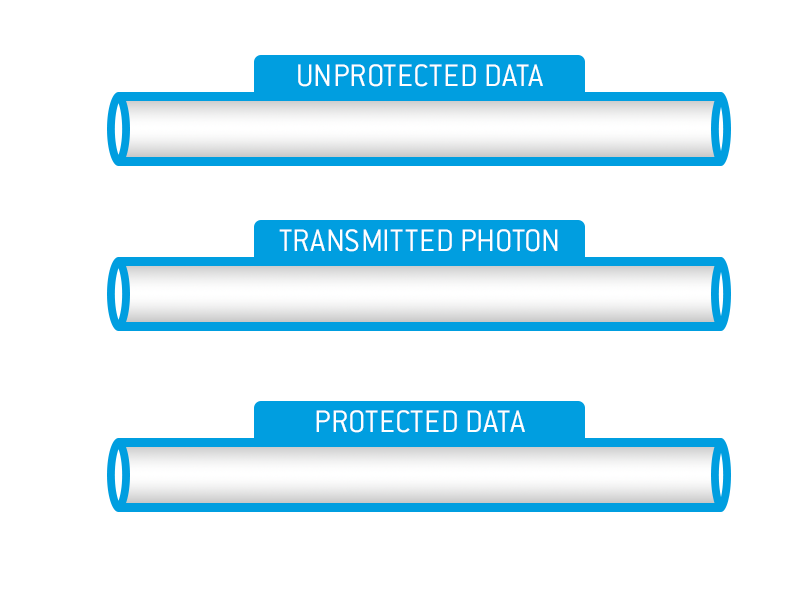
<style>
.page{position:relative;width:800px;height:600px;background:#ffffff}
.page>*{position:absolute;margin:0}
.t1{font:34px "ConduitITCLight";color:#feffff;text-transform:uppercase}
</style>
<div class="page">
<p class="t1" style="left:298px;top:64px;width:245px;height:23px">Unprotected data</p>
<p class="t1" style="left:279px;top:229px;width:279px;height:23px">Transmitted photon</p>
<p class="t1" style="left:316px;top:410px;width:209px;height:23px">PROTECTED DATA</p>
</div>
